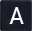
<style>
.page{position:relative;width:32px;height:31px}
.page>*{position:absolute;margin:0}
.t1{font:22.7px "Roboto-Regular";color:#ffffff}
</style>
<div class="page">
<p class="t1" style="left:9px;top:7px;width:15px;height:17px">A</p>
</div>
